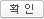
<style>
.page{position:relative;width:44px;height:19px}
.page>*{position:absolute;margin:0}
.t1{font:12px "morris9";color:#4f4f4f}
</style>
<div class="page">
<p class="t1" style="left:10px;top:4px;width:23px;height:10px">확 인</p>
</div>
